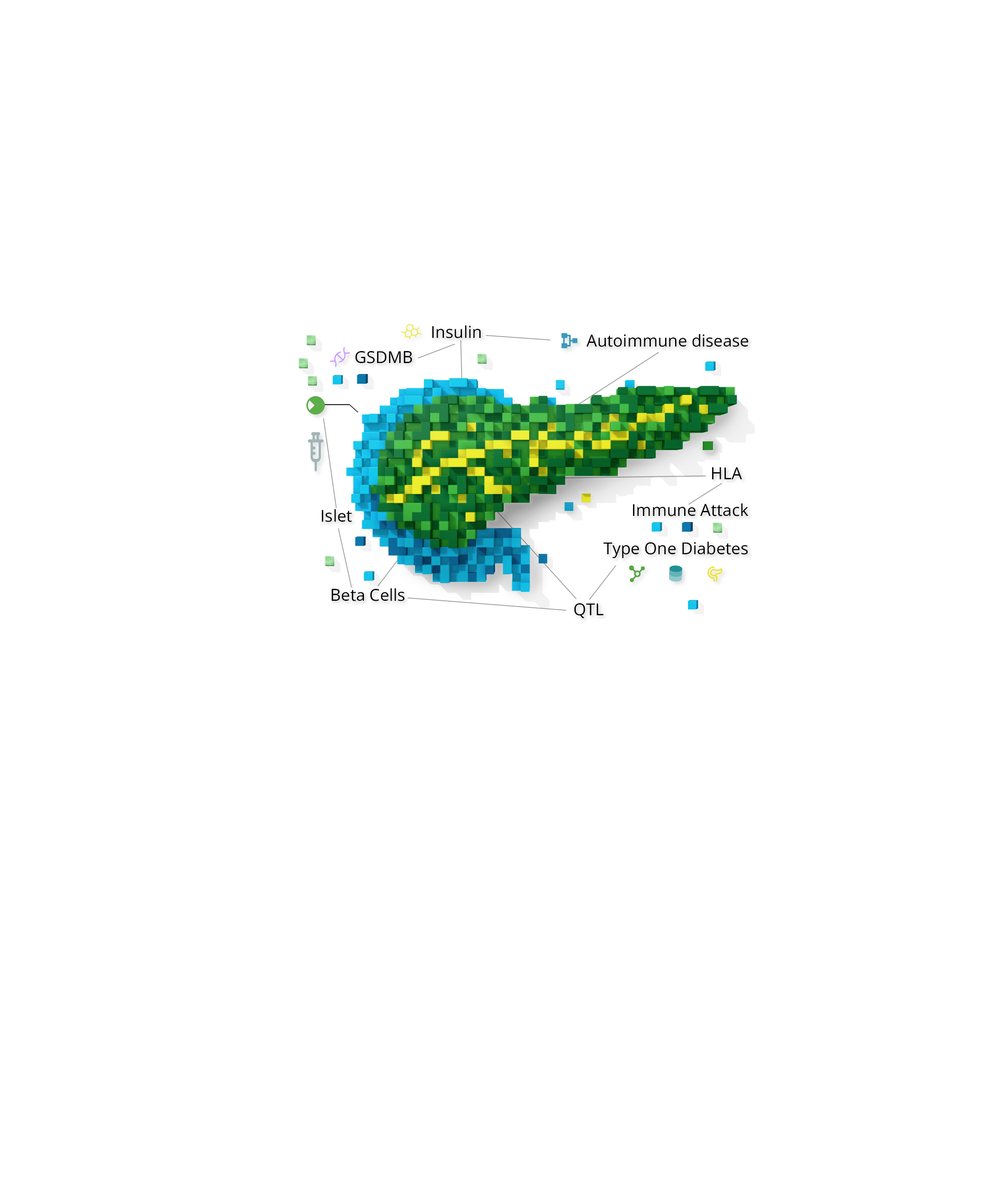
<style>
.page{position:relative;width:992px;height:1202px;background:#ffffff}
.page>*{position:absolute;margin:0}
.t1{font:16.5px "OpenSans-Regular";color:#000000}
</style>
<div class="page">
<p class="t1" style="left:432px;top:325px;width:49px;height:13px">Insulin</p>
<p class="t1" style="left:586px;top:334px;width:162px;height:13px">Autoimmune disease</p>
<p class="t1" style="left:355px;top:351px;width:57px;height:12px">GSDMB</p>
<p class="t1" style="left:712px;top:467px;width:30px;height:12px">HLA</p>
<p class="t1" style="left:322px;top:509px;width:30px;height:13px">Islet</p>
<p class="t1" style="left:633px;top:503px;width:115px;height:13px">Immune Attack</p>
<p class="t1" style="left:603px;top:542px;width:145px;height:16px">Type One Diabetes</p>
<p class="t1" style="left:331px;top:588px;width:74px;height:13px">Beta Cells</p>
<p class="t1" style="left:574px;top:603px;width:29px;height:15px">QTL</p>
</div>
